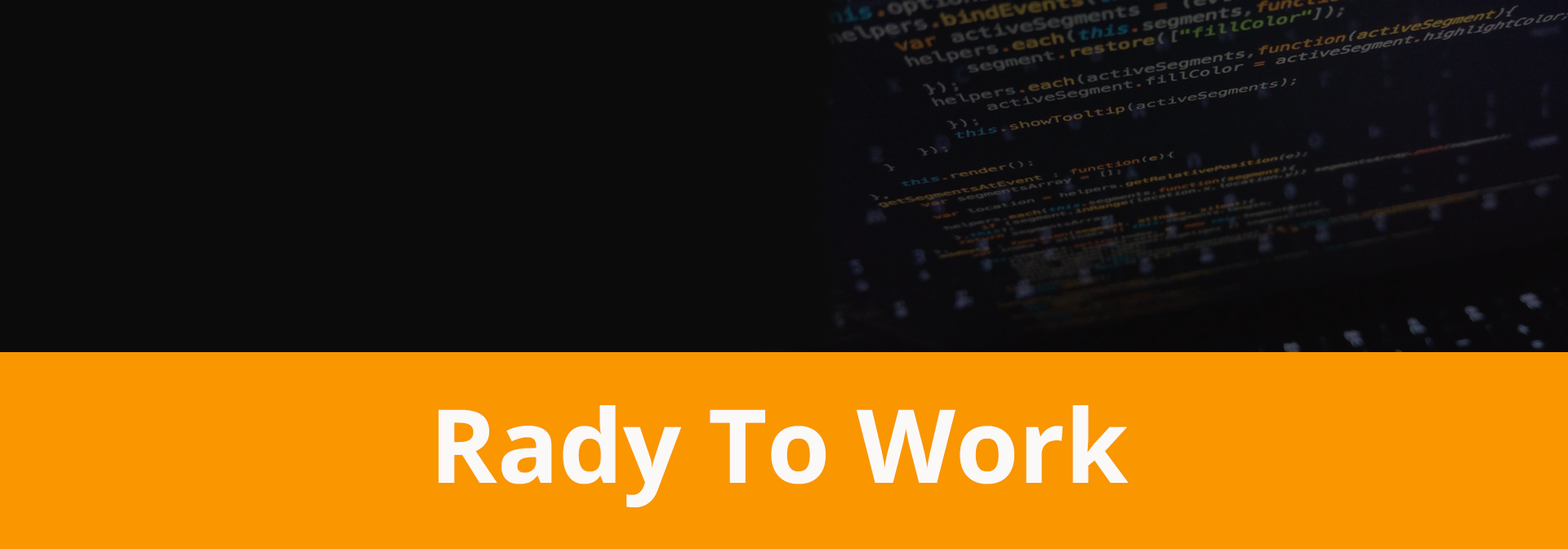
<style>
.page{position:relative;width:1568px;height:549px;background:#0b0b0b}
.page>*{position:absolute;margin:0}
.t1{font:102.1px "OpenSans-Bold";color:#faf9f7}
</style>
<div class="page">
<p class="t1" style="left:439px;top:405px;width:690px;height:102px">Rady To Work</p>
</div>
